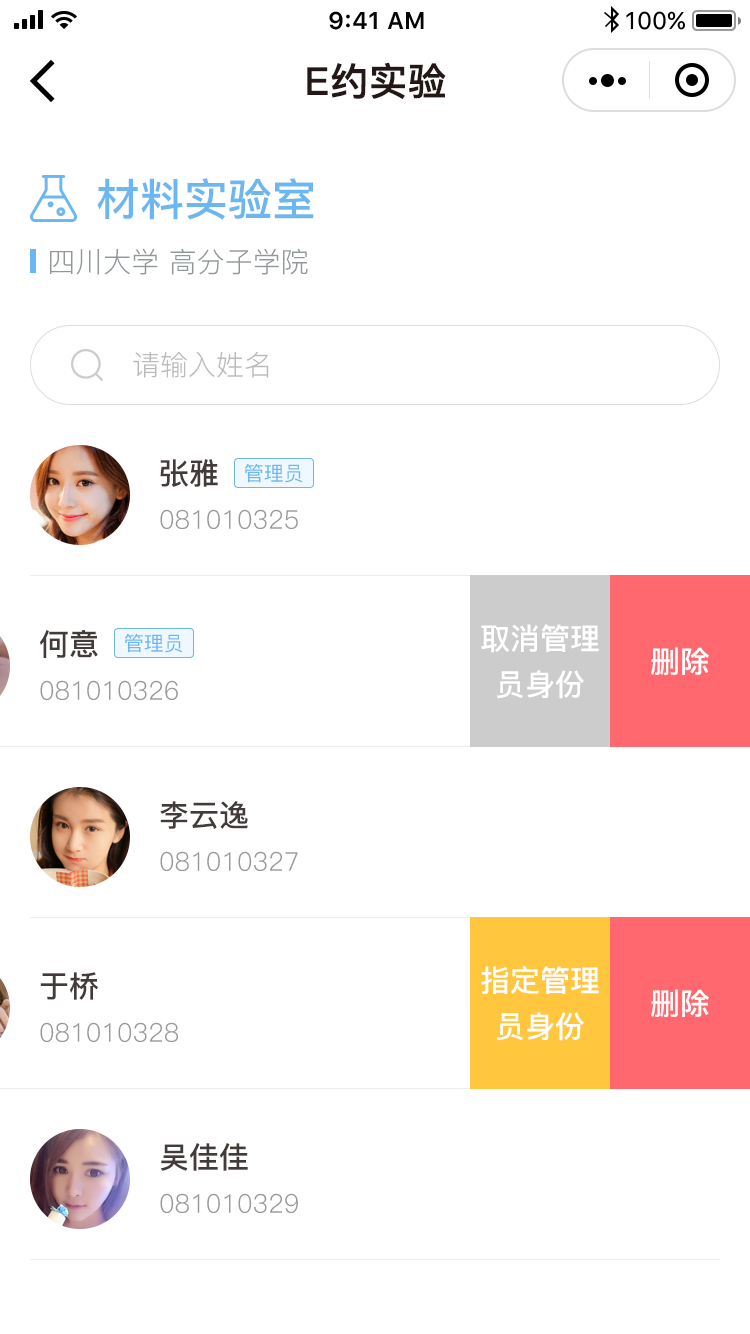
<style>
.page{position:relative;width:750px;height:1334px;background:#ffffff}
.page>*{position:absolute;margin:0}
.t1{font:38px "PingFang-SC-Bold";color:#231815;font-weight:bold}
.t2{font:44px "PingFang-SC-Bold";color:#6cb7f1}
.t3{font:28px "PingFang-SC-Regular";color:#91989a}
.t4{font:28px "PingFang-SC-Regular";color:#bbbbbb}
.t5{font:30px "PingFang-SC-Bold";color:#433b39}
.t6{font:20px "PingFang-SC-Medium";color:#6cb7f1}
.t7{font:26px "PingFang-SC-Regular";color:#999999}
.t8{font:30px/46px "PingFang-SC-Bold";color:#ffffff}
.t9{font:30px "PingFang-SC-Bold";color:#ffffff}
</style>
<div class="page">
<p class="t1" style="left:307px;top:62px;width:139px;height:38px">E约实验</p>
<p class="t2" style="left:97px;top:178px;width:217px;height:42px">材料实验室</p>
<p class="t3" style="left:50px;top:248px;width:258px;height:27px">四川大学 高分子学院</p>
<p class="t4" style="left:133px;top:351px;width:136px;height:27px">请输入姓名</p>
<p class="t5" style="left:160px;top:459px;width:58px;height:28px">张雅</p>
<p class="t6" style="left:245px;top:463px;width:57px;height:20px">管理员</p>
<p class="t7" style="left:160px;top:509px;width:138px;height:20px">081010325</p>
<p class="t5" style="left:40px;top:630px;width:58px;height:28px">何意</p>
<p class="t8" style="left:481px;top:624px;width:118px;height:75px;text-align:center">取消管理<br>员身份</p>
<p class="t6" style="left:125px;top:633px;width:57px;height:20px">管理员</p>
<p class="t9" style="left:651px;top:647px;width:58px;height:28px">删除</p>
<p class="t7" style="left:40px;top:680px;width:138px;height:20px">081010326</p>
<p class="t5" style="left:160px;top:801px;width:88px;height:28px">李云逸</p>
<p class="t7" style="left:160px;top:851px;width:138px;height:20px">081010327</p>
<p class="t8" style="left:481px;top:966px;width:118px;height:75px;text-align:center">指定管理<br>员身份</p>
<p class="t5" style="left:40px;top:972px;width:58px;height:28px">于桥</p>
<p class="t9" style="left:651px;top:989px;width:58px;height:28px">删除</p>
<p class="t7" style="left:40px;top:1022px;width:138px;height:20px">081010328</p>
<p class="t5" style="left:160px;top:1143px;width:88px;height:28px">吴佳佳</p>
<p class="t7" style="left:160px;top:1193px;width:138px;height:20px">081010329</p>
</div>
